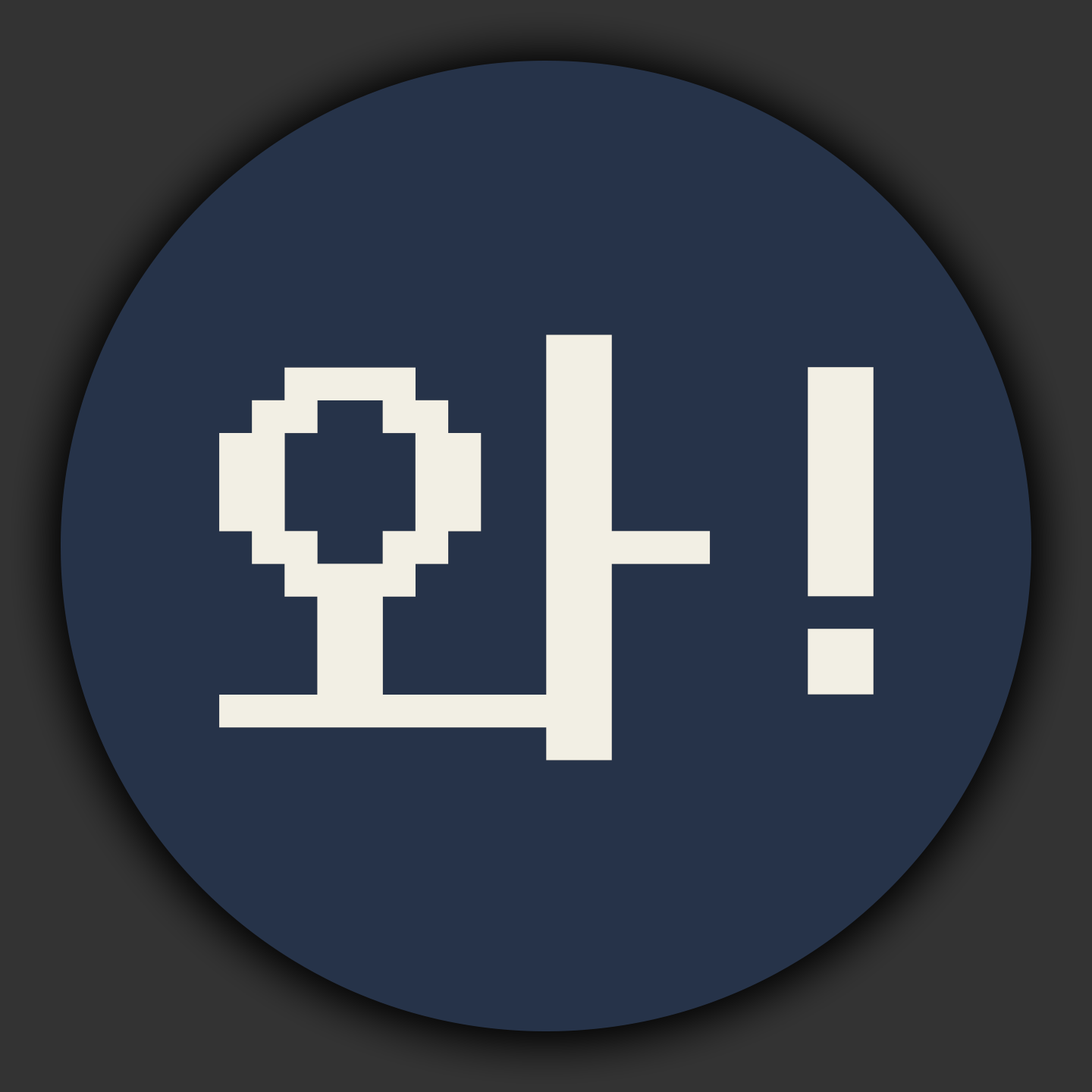
<style>
.page{position:relative;width:1092px;height:1092px;background:#263349}
.page>*{position:absolute;margin:0}
.t1{font:523.1px "NeoDunggeunmoCode-Regular";color:#f2efe4}
</style>
<div class="page">
<p class="t1" style="left:219px;top:334px;width:655px;height:427px">와!</p>
</div>
